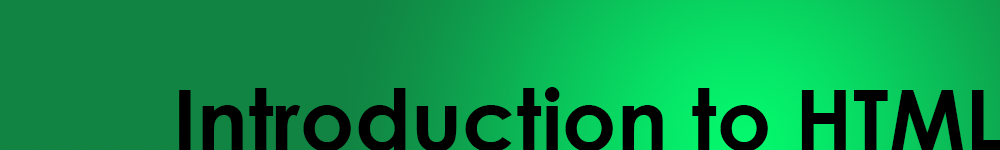
<style>
.page{position:relative;width:1000px;height:150px;background:#118443}
.page>*{position:absolute;margin:0}
.t1{font:85px "CenturyGothic-Bold";color:#000000}
</style>
<div class="page">
<p class="t1" style="left:179px;top:87px;width:822px;height:65px">Introduction to HTML</p>
</div>
